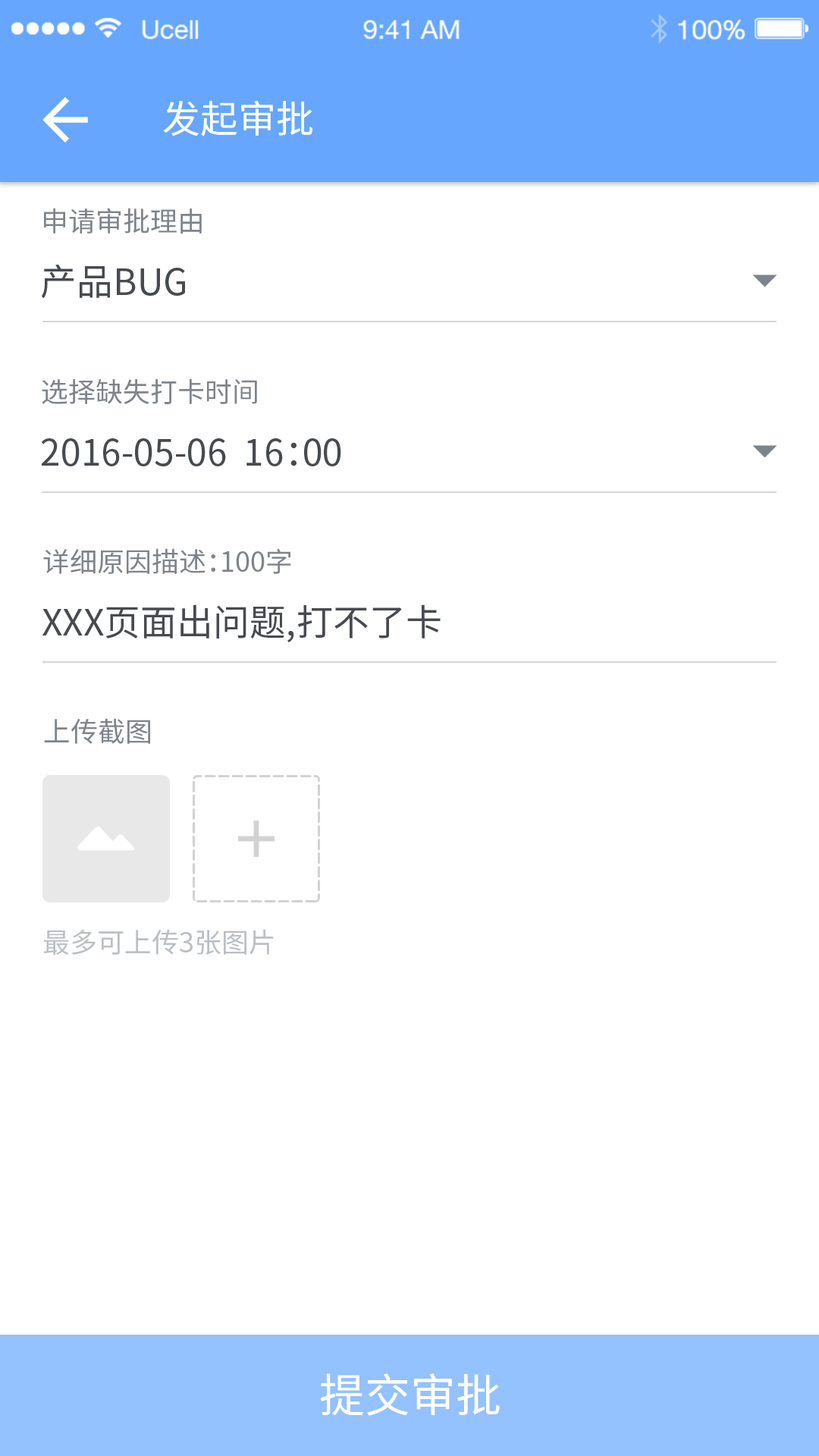
<style>
.page{position:relative;width:819px;height:1456px;background:#ffffff}
.page>*{position:absolute;margin:0}
.t1{font:37.9px "NotoSansHans-Regular";color:#ffffff}
.t2{font:27.3px "NotoSansHans-Regular";color:#7e848c}
.t3{font:36.4px "NotoSansHans-Regular";color:#474a4f}
.t4{font:36.3px "NotoSansHans-Regular";color:#474a4f}
.t5{font:27.3px "NotoSansHans-Regular";color:#bbbfc4}
.t6{font:45.5px "NotoSansHans-Regular";color:#ffffff}
</style>
<div class="page">
<p class="t1" style="left:163px;top:100px;width:149px;height:36px">发起审批</p>
<p class="t2" style="left:44px;top:208px;width:158px;height:26px">申请审批理由</p>
<p class="t3" style="left:41px;top:264px;width:144px;height:35px">产品BUG</p>
<p class="t2" style="left:42px;top:378px;width:215px;height:26px">选择缺失打卡时间</p>
<p class="t3" style="left:41px;top:438px;width:300px;height:28px">2016-05-06  16：00</p>
<p class="t2" style="left:43px;top:548px;width:248px;height:26px">详细原因描述：100字</p>
<p class="t4" style="left:42px;top:604px;width:399px;height:38px">XXX页面出问题,打不了卡</p>
<p class="t2" style="left:44px;top:718px;width:106px;height:26px">上传截图</p>
<p class="t5" style="left:44px;top:929px;width:230px;height:26px">最多可上传3张图片</p>
<p class="t6" style="left:321px;top:1373px;width:179px;height:43px">提交审批</p>
</div>
